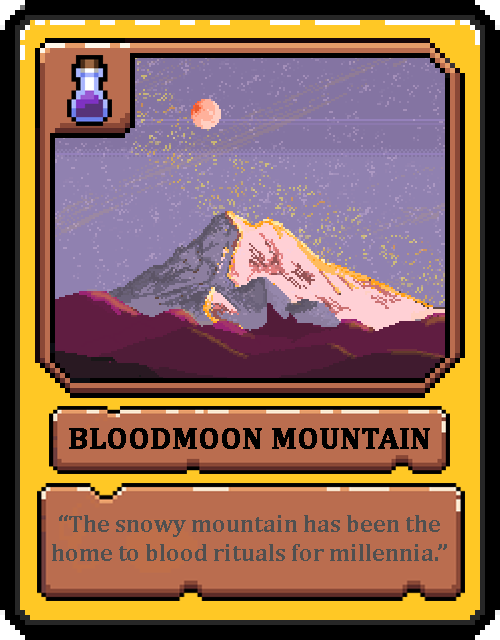
<style>
.page{position:relative;width:500px;height:640px}
.page>*{position:absolute;margin:0}
.t1{font:30px "Cambria-Bold";color:#000000;text-transform:uppercase;font-weight:bold}
.t2{font:24px "Cambria-Bold";color:#505050}
</style>
<div class="page">
<p class="t1" style="left:69px;top:428px;width:361px;height:21px">BloodMoon Mountain</p>
<p class="t2" style="left:52px;top:515px;width:395px;height:46px;text-align:center">“The snowy mountain has been the home to blood rituals for millennia.”</p>
</div>
